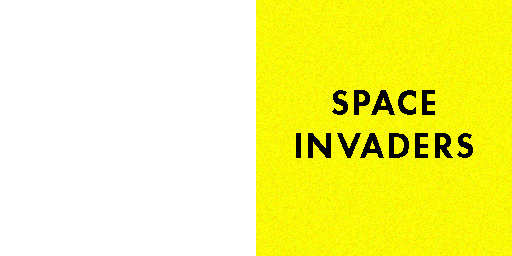
<style>
.page{position:relative;width:512px;height:256px;background:#ffffff}
.page>*{position:absolute;margin:0}
.t1{font:36px "FuturaPT-Heavy";letter-spacing:0.05em;color:#000000}
</style>
<div class="page">
<p class="t1" style="left:296px;top:90px;width:177px;height:68px;text-align:center">SPACE <br>INVADERS</p>
</div>
